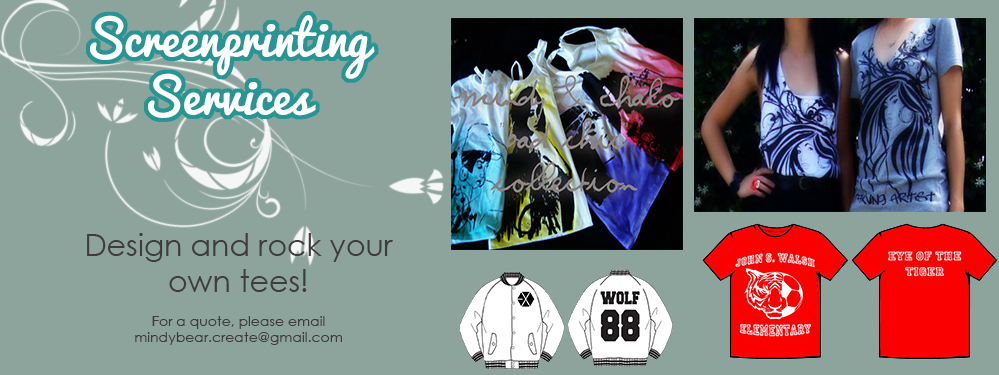
<style>
.page{position:relative;width:999px;height:375px;background:#8da49c}
.page>*{position:absolute;margin:0}
.t1{font:48px "Pacifico-Regular";color:#ffffff}
.t2{font:14px "CenturyGothic";color:#3f3c3c}
.t3{font:30px "CenturyGothic";color:#3f3c3c}
.t4{font:14px "Tahoma";color:#3f3c3c}
</style>
<div class="page">
<p class="t1" style="left:90px;top:15px;width:285px;height:103px;text-align:center">Screenprinting<br>Services</p>
<p class="t2" style="left:87px;top:233px;width:306px;height:112px;text-align:center"><span class="t3">Design and rock your own tees!<br></span><span class="t4"><br>F</span>or a quote, please email<br>mindybear.create@gmail.com</p>
</div>
